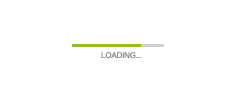
<style>
.page{position:relative;width:235px;height:93px;background:#ffffff}
.page>*{position:absolute;margin:0}
.t1{font:8px "ArialMT";letter-spacing:-0.025em;color:#898989;text-transform:uppercase}
</style>
<div class="page">
<p class="t1" style="left:101px;top:52px;width:41px;height:7px">loading...</p>
</div>
